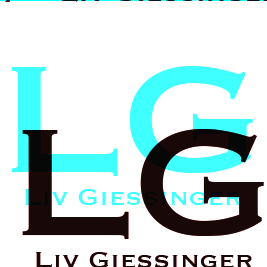
<style>
.page{position:relative;width:267px;height:267px;background:#ffffff}
.page>*{position:absolute;margin:0}
.t1{font:200px "Copperplate";color:#40ffff}
.t2{font:30px "Copperplate"}
</style>
<div class="page">
<p class="t1" style="left:11px;top:65px;width:242px;height:110px">LG</p>
<p class="t2" style="left:24px;top:188px;width:217px;height:17px">Liv Giessinger</p>
</div>
